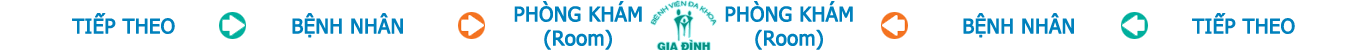
<style>
.page{position:relative;width:1366px;height:50px;background:#ffffff}
.page>*{position:absolute;margin:0}
.t1{font:20px "Tahoma";color:#0081bd;font-weight:bold}
</style>
<div class="page">
<p class="t1" style="left:514px;top:1px;width:128px;height:49px;text-align:center">PHÒNG KHÁM<br>(Room)</p>
<p class="t1" style="left:72px;top:13px;width:103px;height:21px">TIẾP THEO</p>
<p class="t1" style="left:292px;top:13px;width:111px;height:25px">BỆNH NHÂN</p>
<p class="t1" style="left:963px;top:13px;width:111px;height:25px">BỆNH NHÂN</p>
<p class="t1" style="left:1192px;top:13px;width:103px;height:21px">TIẾP THEO</p>
</div>
